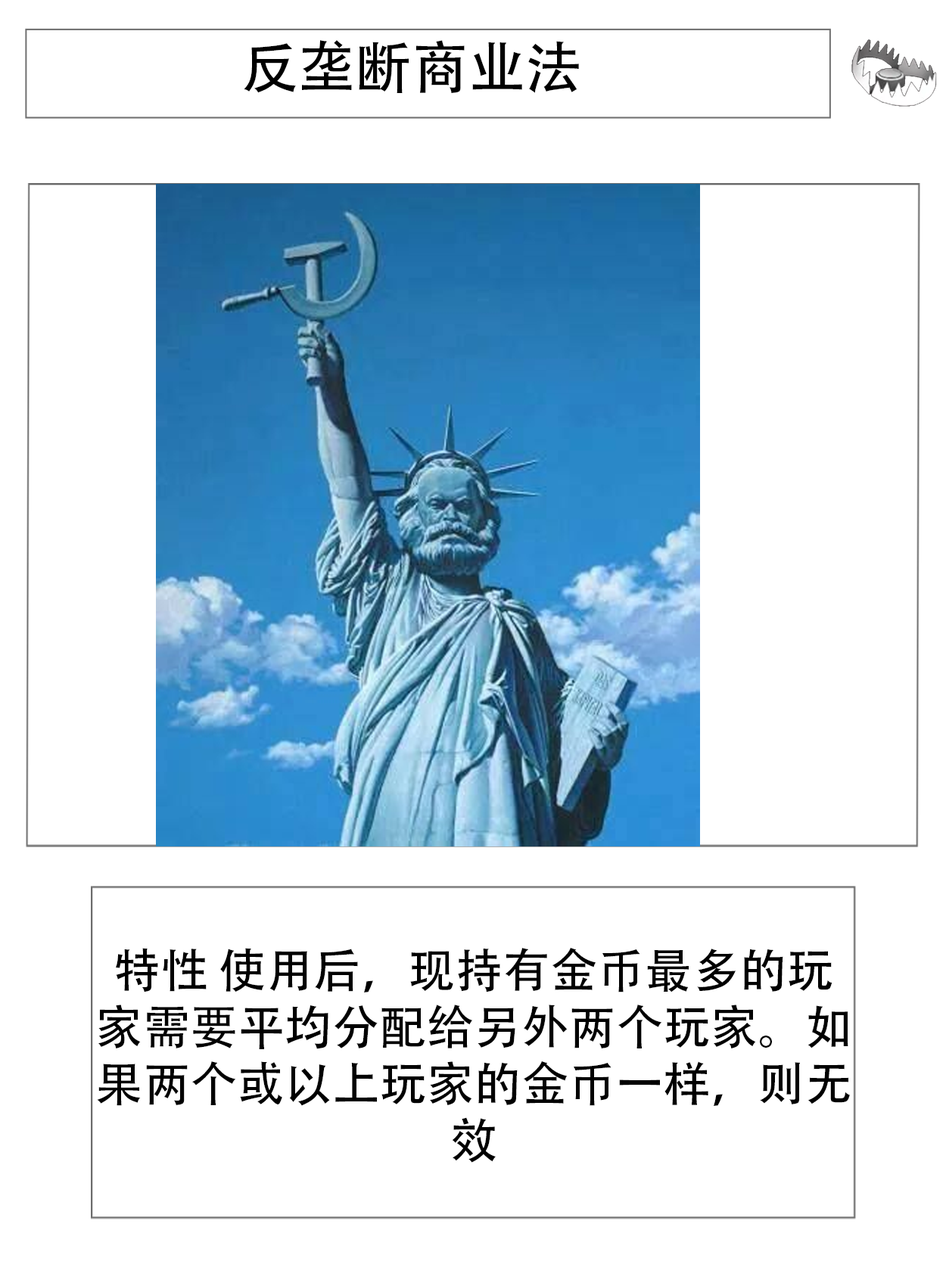
<style>
.page{position:relative;width:946px;height:1261px;background:#ffffff}
.page>*{position:absolute;margin:0}
.t1{font:56.7px "AdobeHeitiStd-Regular";color:#000000}
.t2{font:47.3px "AdobeHeitiStd-Regular";color:#000000}
</style>
<div class="page">
<p class="t1" style="left:244px;top:40px;width:335px;height:53px">反垄断商业法</p>
<p class="t2" style="left:97px;top:948px;width:753px;height:215px;text-align:center"><span class="t1"><br></span>特性 使用后，现持有金币最多的玩家需要平均分配给另外两个玩家。如果两个或以上玩家的金币一样，则无效</p>
</div>
